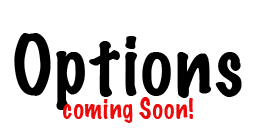
<style>
.page{position:relative;width:256px;height:128px;background:#ffffff}
.page>*{position:absolute;margin:0}
.t1{font:75px "MarkerFelt-Thin";color:#000000}
.t2{font:25px "MarkerFelt-Thin";color:#eb0b0b}
</style>
<div class="page">
<p class="t1" style="left:14px;top:33px;width:228px;height:77px">Options</p>
<p class="t2" style="left:63px;top:97px;width:130px;height:26px">coming Soon!</p>
</div>
